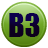
<style>
.page{position:relative;width:48px;height:48px;background:#ffffff}
.page>*{position:absolute;margin:0}
.t1{font:30px "Impact"}
</style>
<div class="page">
<p class="t1" style="left:9px;top:13px;width:31px;height:24px">B3</p>
</div>
